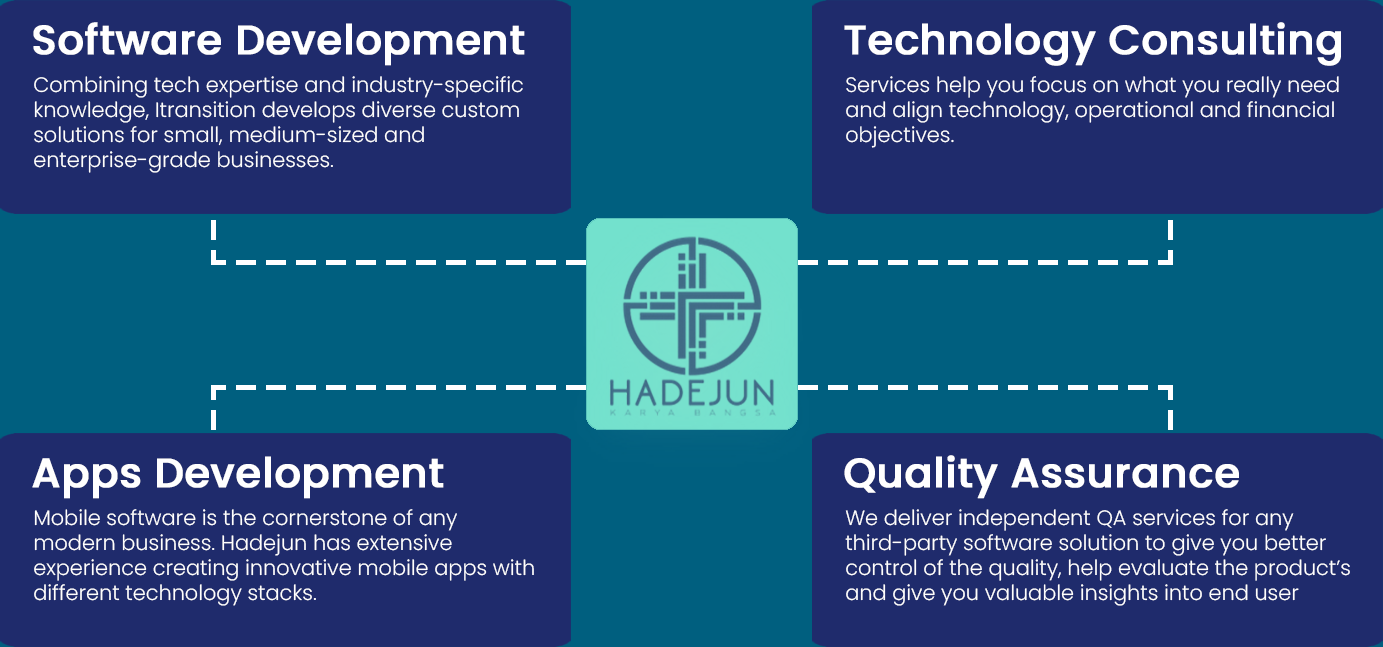
<style>
.page{position:relative;width:1383px;height:647px;background:#1f2b6c}
.page>*{position:absolute;margin:0}
.t1{font:41.1px "Poppins-Medium";color:#ffffff;font-weight:bold}
.t2{font:20.8px "Poppins-Light";color:#ffffff}
</style>
<div class="page">
<p class="t1" style="left:33px;top:22px;width:492px;height:44px">Software Development</p>
<p class="t1" style="left:844px;top:22px;width:497px;height:44px">Technology Consulting</p>
<p class="t2" style="left:34px;top:76px;width:489px;height:97px">Combining tech expertise and industry-specific knowledge, Itransition develops diverse custom solutions for small, medium-sized and enterprise-grade businesses.</p>
<p class="t2" style="left:846px;top:76px;width:493px;height:72px">Services help you focus on what you really need and align technology, operational and financial objectives.</p>
<p class="t1" style="left:32px;top:456px;width:412px;height:43px">Apps Development</p>
<p class="t1" style="left:844px;top:455px;width:395px;height:44px">Quality Assurance</p>
<p class="t2" style="left:34px;top:509px;width:500px;height:97px">Mobile software is the cornerstone of any modern business. Hadejun has extensive experience creating innovative mobile apps with different technology stacks.</p>
<p class="t2" style="left:845px;top:509px;width:505px;height:97px">We deliver independent QA services for any third-party software solution to give you better control of the quality, help evaluate the product’s and give you valuable insights into end user</p>
</div>
